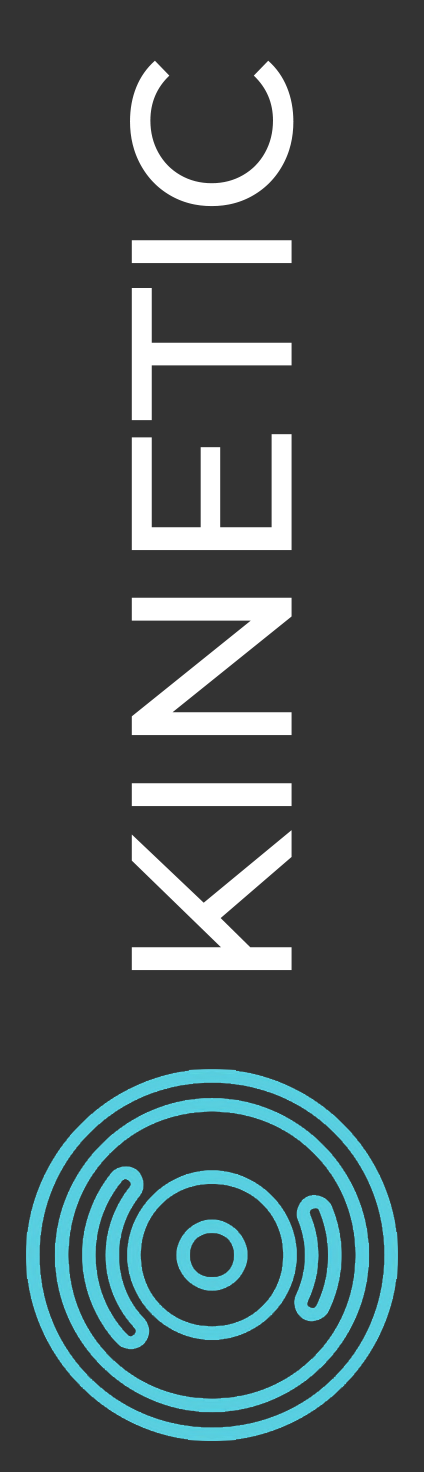
<style>
.page{position:relative;width:424px;height:1472px;background:#333333}
.page>*{position:absolute;margin:0}
.t1{font:228px "Montserrat-Medium";color:#ffffff}
</style>
<div class="page">
<p class="t1" style="left:130px;top:60px;width:164px;height:911px;rotate:-90deg">KINETIC</p>
</div>
